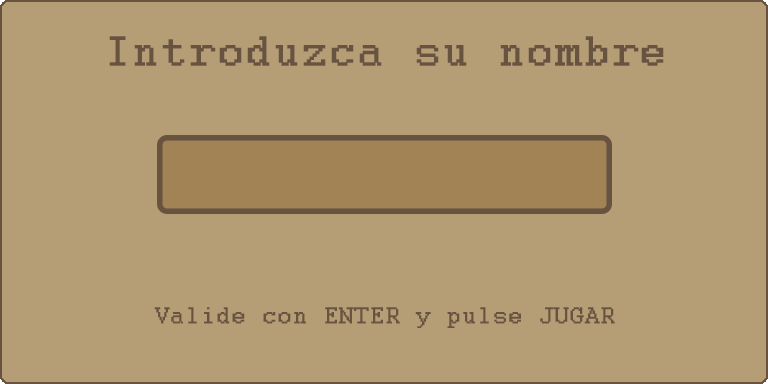
<style>
.page{position:relative;width:768px;height:384px;background:#b59d76}
.page>*{position:absolute;margin:0}
.t1{font:45.8px "Courier";letter-spacing:0.05em;color:#685341;font-weight:bold}
.t2{font:25px "Courier";letter-spacing:0.05em;color:#685341;font-weight:bold}
</style>
<div class="page">
<p class="t1" style="left:109px;top:36px;width:555px;height:30px">Introduzca su nombre</p>
<p class="t2" style="left:154px;top:307px;width:461px;height:21px">Valide con ENTER y pulse JUGAR</p>
</div>
